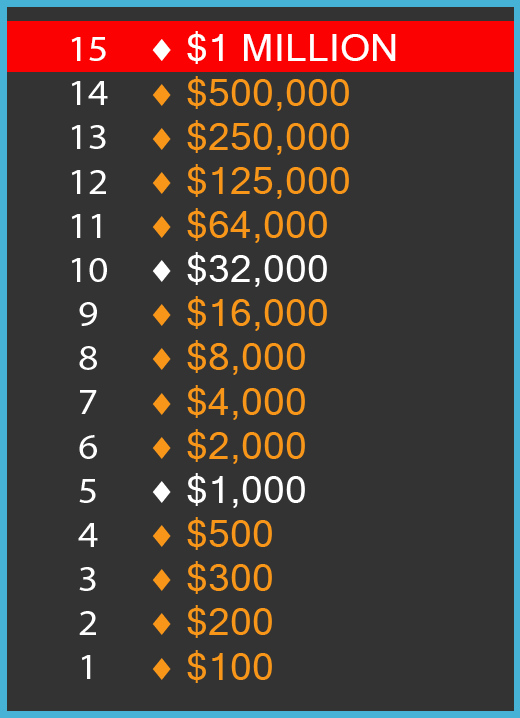
<style>
.page{position:relative;width:520px;height:718px;background:#333333}
.page>*{position:absolute;margin:0}
.t1{font:36.8px "MyriadPro-Regular";color:#ffffff;scale:1.07 1}
.t2{font:36.8px "MicrosoftSansSerif";color:#ffffff;scale:1.07 1}
.t3{font:36.8px "SymbolMT";color:#ffffff;scale:1.07 1}
.t4{font:36.8px "SymbolMT";color:#f79619;scale:1.07 1}
.t5{font:36.8px "MicrosoftSansSerif";color:#f79619;scale:1.07 1}
</style>
<div class="page">
<p class="t1" style="left:71px;top:37px;width:37px;height:642px;text-align:center">15<br>14<br>13<br>12<br>11<br>10<br>9<br>8<br>7<br>6<br>5<br>4<br>3<br>2<br>1</p>
<p class="t2" style="left:152px;top:31px;width:244px;height:652px"><span class="t3">♦ </span>$1 MILLION<br><span class="t4">♦ </span><span class="t5">$500,000<br></span><span class="t4">♦ </span><span class="t5">$250,000<br></span><span class="t4">♦ </span><span class="t5">$125,000<br></span><span class="t4">♦ </span><span class="t5">$64,000<br></span><span class="t3">♦ </span>$32,000<br><span class="t4">♦ </span><span class="t5">$16,000<br></span><span class="t4">♦ </span><span class="t5">$8,000<br></span><span class="t4">♦ </span><span class="t5">$4,000<br></span><span class="t4">♦ </span><span class="t5">$2,000<br></span><span class="t3">♦ </span>$1,000<br><span class="t4">♦ </span><span class="t5">$500<br></span><span class="t4">♦ </span><span class="t5">$300<br></span><span class="t4">♦ </span><span class="t5">$200<br></span><span class="t4">♦ </span><span class="t5">$100</span></p>
</div>
